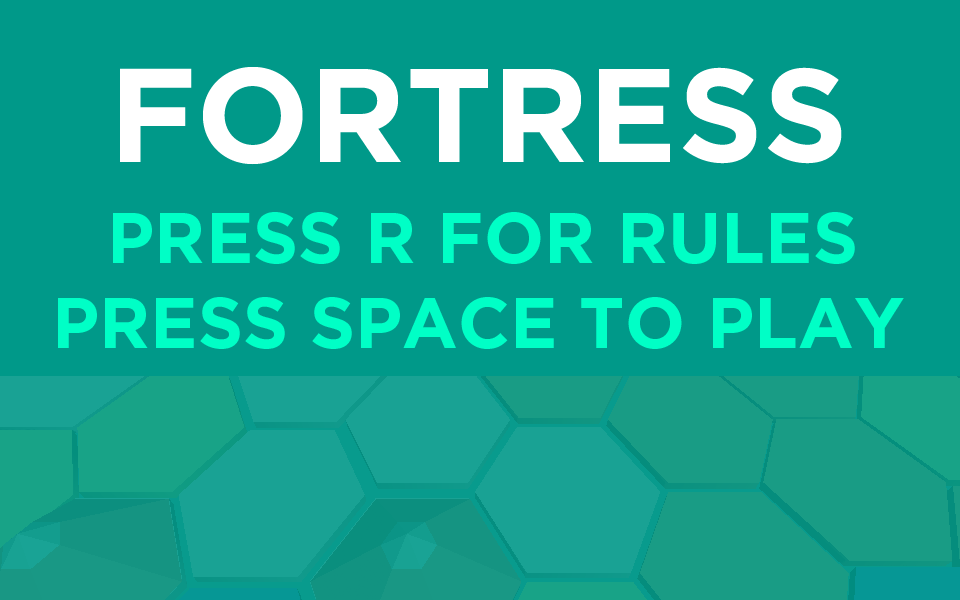
<style>
.page{position:relative;width:960px;height:600px;background:#009989}
.page>*{position:absolute;margin:0}
.t1{font:133.3px "Gotham-Bold";color:#ffffff;text-transform:uppercase}
.t2{font:70.8px "Gotham-Bold";color:#00ffc6;text-transform:uppercase}
</style>
<div class="page">
<p class="t1" style="left:120px;top:67px;width:722px;height:98px">fortress</p>
<p class="t2" style="left:113px;top:212px;width:742px;height:52px">press R for rules</p>
<p class="t2" style="left:58px;top:297px;width:846px;height:52px">press Space to play</p>
</div>
